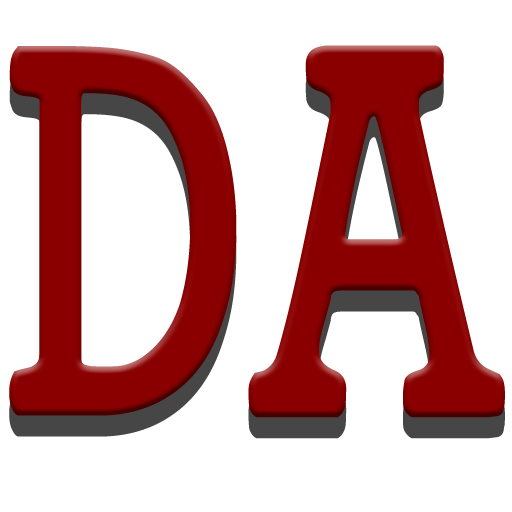
<style>
.page{position:relative;width:512px;height:512px;background:#ffffff}
.page>*{position:absolute;margin:0}
.t1{font:461.3px "Italianate";color:#8a0000;scale:0.7 1}
</style>
<div class="page">
<p class="t1" style="left:9px;top:45px;width:496px;height:373px">DA</p>
</div>
